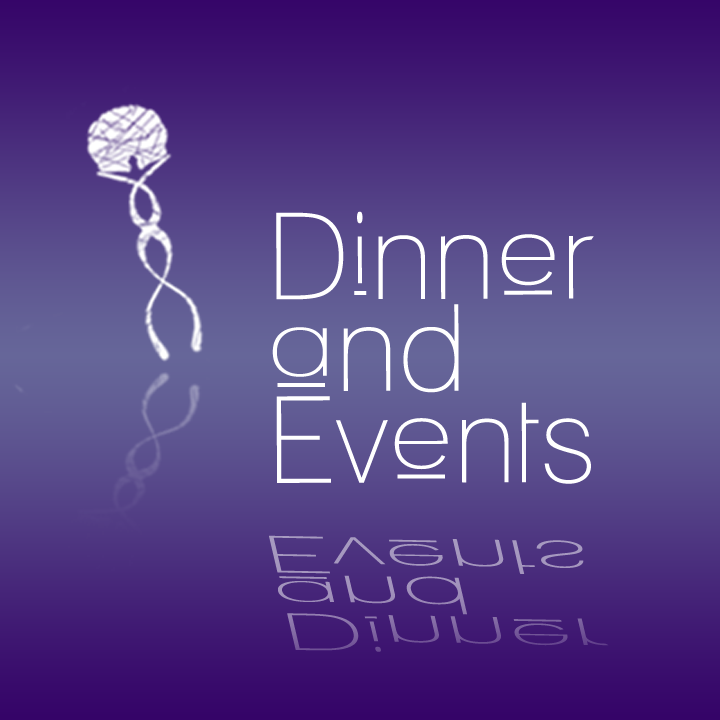
<style>
.page{position:relative;width:720px;height:720px}
.page>*{position:absolute;margin:0}
.t1{font:120px/45.9px "Lane-Upper";color:#ffffff}
.t2{font:52px/19.9px "Lane-Upper";scale:2.29 1}
</style>
<div class="page">
<p class="t1" style="left:272px;top:211px;width:322px;height:273px">Dinner<br><br>and<br><br>Events</p>
<p class="t2" style="left:269px;top:535px;width:340px;height:117px;rotate:1deg">Dinner<br><br>and<br><br>Events</p>
</div>
